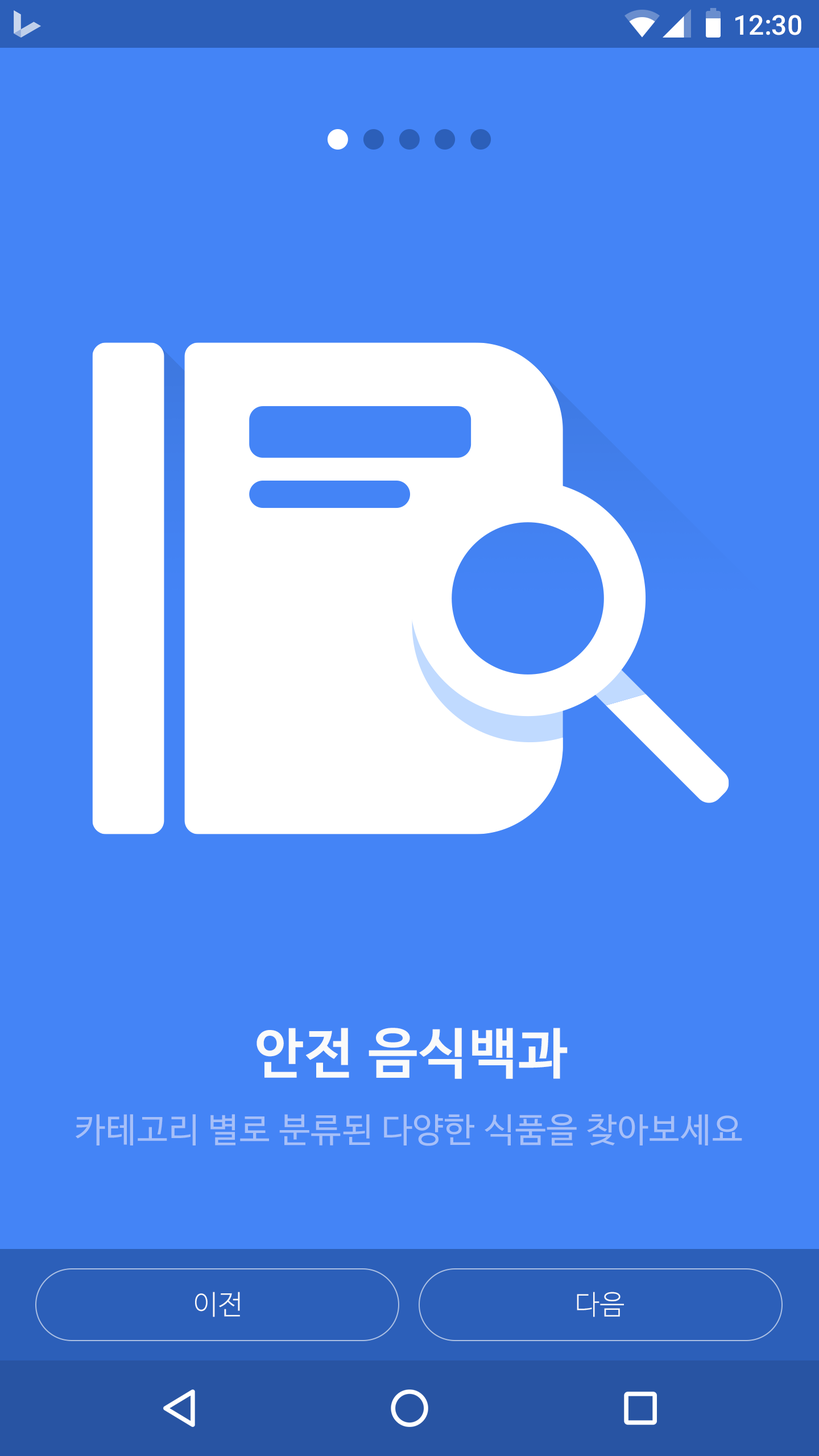
<style>
.page{position:relative;width:819px;height:1456px;background:#4484f6}
.page>*{position:absolute;margin:0}
.t1{font:27.3px "Roboto-Medium";color:#ffffff}
.t2{font:54.6px "NanumBarunGothicBold";letter-spacing:0.025em;color:#fafafa}
.t3{font:34.1px "NanumBarunGothic";letter-spacing:0.025em;color:#a6bff8}
.t4{font:27.3px "NanumBarunGothicLight";letter-spacing:0.025em;color:#fafafa}
</style>
<div class="page">
<p class="t1" style="left:735px;top:15px;width:66px;height:20px">12:30</p>
<p class="t2" style="left:257px;top:1028px;width:311px;height:51px">안전 음식백과</p>
<p class="t3" style="left:76px;top:1114px;width:666px;height:32px">카테고리 별로 분류된 다양한 식품을 찾아보세요</p>
<p class="t4" style="left:195px;top:1292px;width:45px;height:25px">이전</p>
<p class="t4" style="left:577px;top:1292px;width:47px;height:25px">다음</p>
</div>
